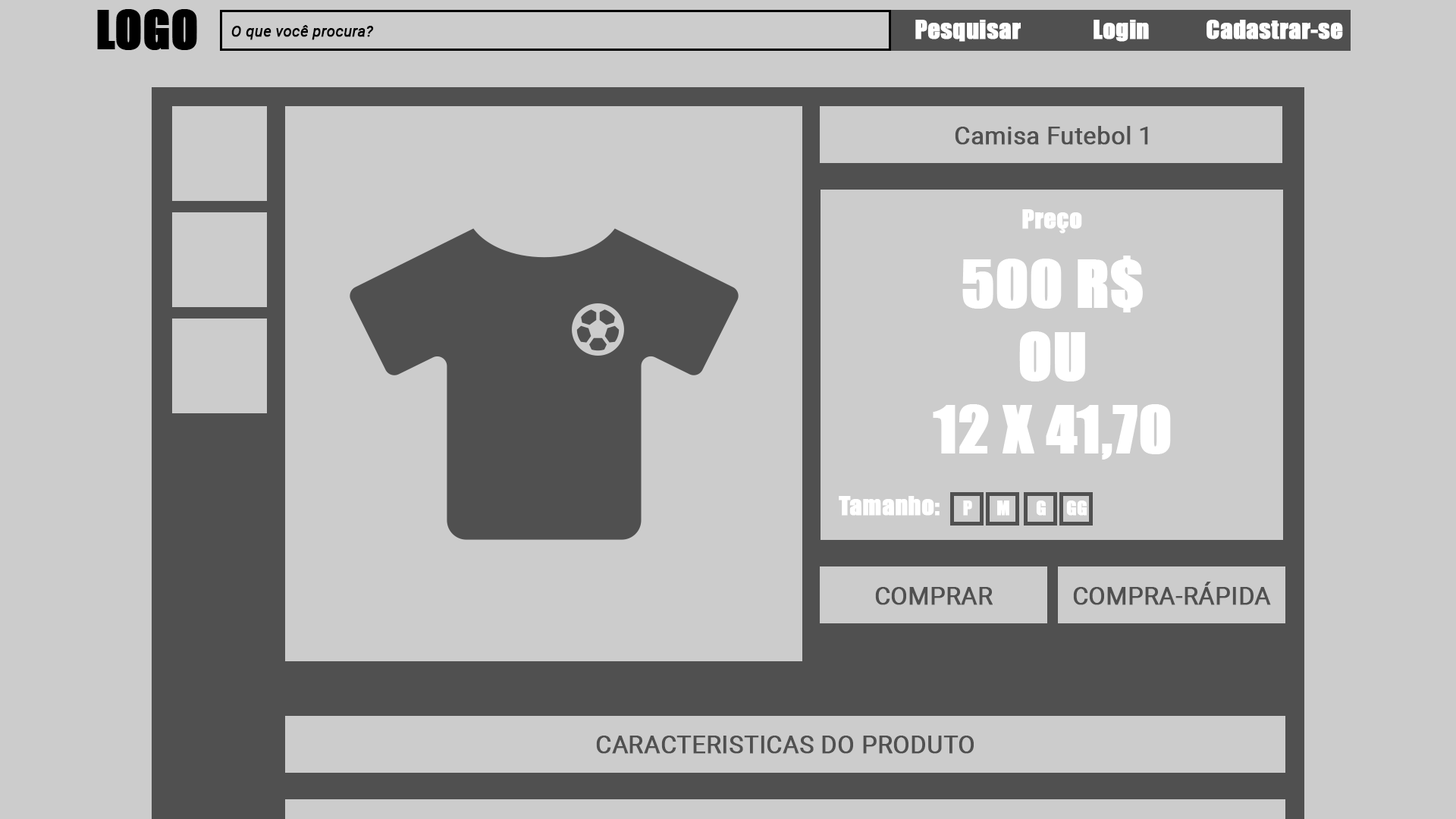
<style>
.page{position:relative;width:1456px;height:819px;background:#cccccc}
.page>*{position:absolute;margin:0}
.t1{font:15.2px "Roboto-Italic";color:#000000;font-weight:bold}
.t2{font:24.3px "Impact";color:#ffffff;font-weight:bold}
.t3{font:24.3px "Roboto-Regular";color:#505050;font-weight:bold}
.t4{font:18.2px "Impact";color:#ffffff;font-weight:bold}
</style>
<div class="page">
<p class="t1" style="left:231px;top:25px;width:143px;height:15px">O que você procura?</p>
<p class="t2" style="left:915px;top:20px;width:106px;height:22px">Pesquisar</p>
<p class="t2" style="left:1094px;top:20px;width:55px;height:22px">Login</p>
<p class="t2" style="left:1206px;top:20px;width:137px;height:19px">Cadastrar-se</p>
<p class="t3" style="left:955px;top:126px;width:193px;height:19px">Camisa Futebol 1</p>
<p class="t2" style="left:1022px;top:209px;width:60px;height:25px">Preço</p>
<p class="t2" style="left:839px;top:496px;width:101px;height:20px">Tamanho:</p>
<p class="t4" style="left:963px;top:500px;width:9px;height:16px">P</p>
<p class="t4" style="left:997px;top:500px;width:12px;height:16px">M</p>
<p class="t4" style="left:1036px;top:500px;width:10px;height:16px">G</p>
<p class="t4" style="left:1066px;top:500px;width:21px;height:16px">GG</p>
<p class="t3" style="left:1073px;top:582px;width:198px;height:23px">COMPRA-RÁPIDA</p>
<p class="t3" style="left:875px;top:587px;width:118px;height:18px">COMPRAR</p>
<p class="t3" style="left:596px;top:736px;width:378px;height:18px">CARACTERISTICAS DO PRODUTO</p>
</div>
